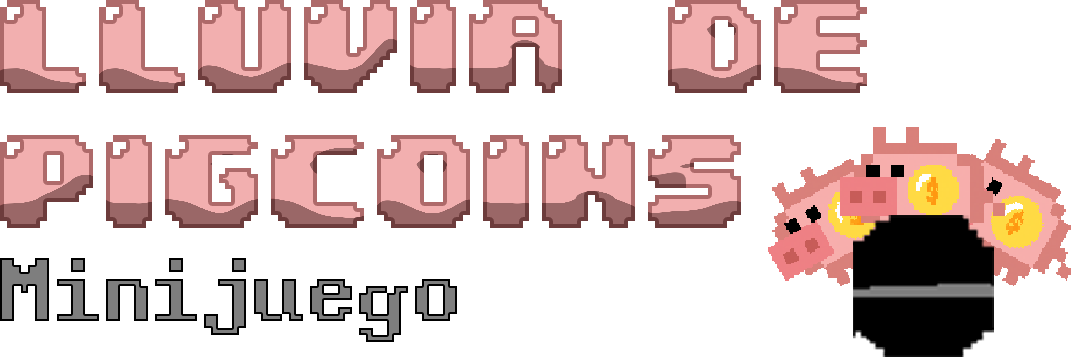
<style>
.page{position:relative;width:1071px;height:357px;background:#ffffff}
.page>*{position:absolute;margin:0}
.t1{font:112.5px "04b30"}
.t2{font:112.5px "Windows-Command-Prompt"}
</style>
<div class="page">
<p class="t1" style="left:0px;top:0px;width:867px;height:228px">LLUVIA DE<br>PIGCOINS</p>
<p class="t2" style="left:0px;top:258px;width:457px;height:84px">Minijuego</p>
</div>
